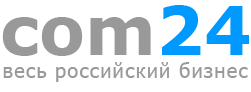
<style>
.page{position:relative;width:251px;height:92px;background:#ffffff}
.page>*{position:absolute;margin:0}
.t1{font:67px "Verdana-Bold";color:#999999}
.t2{font:67px "Verdana-Bold";color:#0099ff}
.t3{font:20px "Tahoma";letter-spacing:0.06em;color:#999999}
</style>
<div class="page">
<p class="t1" style="left:2px;top:5px;width:247px;height:51px">com<span class="t2">24</span></p>
<p class="t3" style="left:3px;top:62px;width:245px;height:20px">весь российский бизнес</p>
</div>
